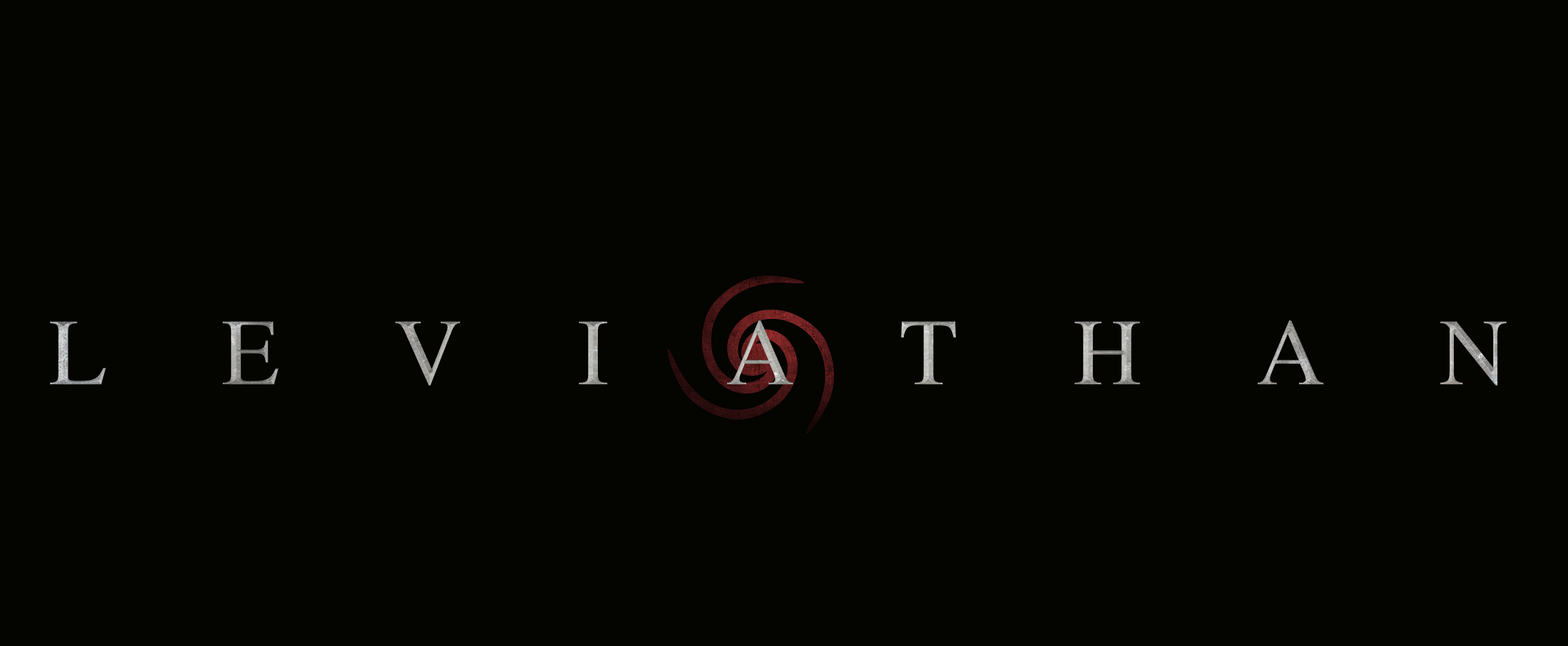
<style>
.page{position:relative;width:1568px;height:646px;background:#040400}
.page>*{position:absolute;margin:0}
.t1{font:94.8px "STIXGeneral-Regular";letter-spacing:0.2em}
</style>
<div class="page">
<p class="t1" style="left:50px;top:320px;width:1457px;height:66px">LEVIATHAN</p>
</div>
